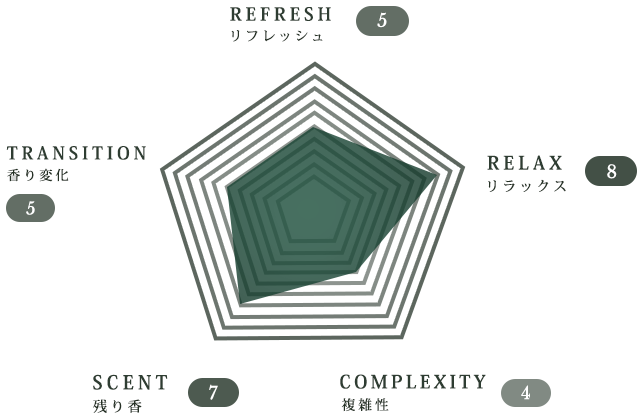
<style>
.page{position:relative;width:640px;height:420px;background:#ffffff}
.page>*{position:absolute;margin:0}
.t1{font:17.9px "KozMinPr6N-Bold";letter-spacing:0.22em;color:#27452e}
.t2{font:17.9px "LibreBaskerville-Regular";letter-spacing:0.06em;color:#ffffff}
.t3{font:13.4px "KozMinPr6N-Medium";letter-spacing:0.22em;color:#253125}
.t4{font:17.5px "KozMinPr6N-Bold";letter-spacing:0.22em;color:#27452e}
.t5{font:18.4px "KozMinPr6N-Bold";letter-spacing:0.22em;color:#27452e}
.t6{font:13.1px "KozMinPr6N-Medium";letter-spacing:0.22em;color:#20381f}
.t7{font:17.7px "LibreBaskerville-Regular";letter-spacing:0.06em;color:#ffffff}
.t8{font:13.8px "KozMinPr6N-Medium";letter-spacing:0.22em;color:#20381f}
.t9{font:16.8px "LibreBaskerville-Regular";letter-spacing:0.06em;color:#ffffff}
.t10{font:18.9px "KozMinPr6N-Bold";letter-spacing:0.22em;color:#27452e}
.t11{font:18.2px "KozMinPr6N-Bold";letter-spacing:0.18em;color:#27452e}
.t12{font:17.4px "LibreBaskerville-Regular";letter-spacing:0.06em;color:#ffffff}
.t13{font:17.1px "LibreBaskerville-Regular";letter-spacing:0.06em;color:#ffffff}
.t14{font:14.2px "KozMinPr6N-Medium";letter-spacing:0.22em;color:#20381f}
.t15{font:13.7px "KozMinPr6N-Medium";letter-spacing:0.22em;color:#253125}
</style>
<div class="page">
<p class="t1" style="left:230px;top:7px;width:101px;height:14px">REFRESH</p>
<p class="t2" style="left:377px;top:12px;width:10px;height:16px">5</p>
<p class="t3" style="left:231px;top:30px;width:92px;height:12px">リフレッシュ</p>
<p class="t4" style="left:6px;top:146px;width:140px;height:14px">TRANSITION</p>
<p class="t5" style="left:487px;top:155px;width:75px;height:15px">RELAX</p>
<p class="t6" style="left:7px;top:168px;width:62px;height:14px">香り変化</p>
<p class="t7" style="left:607px;top:164px;width:10px;height:15px">8</p>
<p class="t8" style="left:488px;top:179px;width:78px;height:13px">リラックス</p>
<p class="t9" style="left:26px;top:201px;width:9px;height:14px">5</p>
<p class="t10" style="left:93px;top:374px;width:75px;height:16px">SCENT</p>
<p class="t11" style="left:340px;top:374px;width:146px;height:15px">COMPLEXITY</p>
<p class="t12" style="left:209px;top:384px;width:9px;height:16px">7</p>
<p class="t13" style="left:521px;top:385px;width:9px;height:15px">4</p>
<p class="t14" style="left:93px;top:399px;width:49px;height:14px">残り香</p>
<p class="t15" style="left:341px;top:398px;width:48px;height:14px">複雑性</p>
</div>
